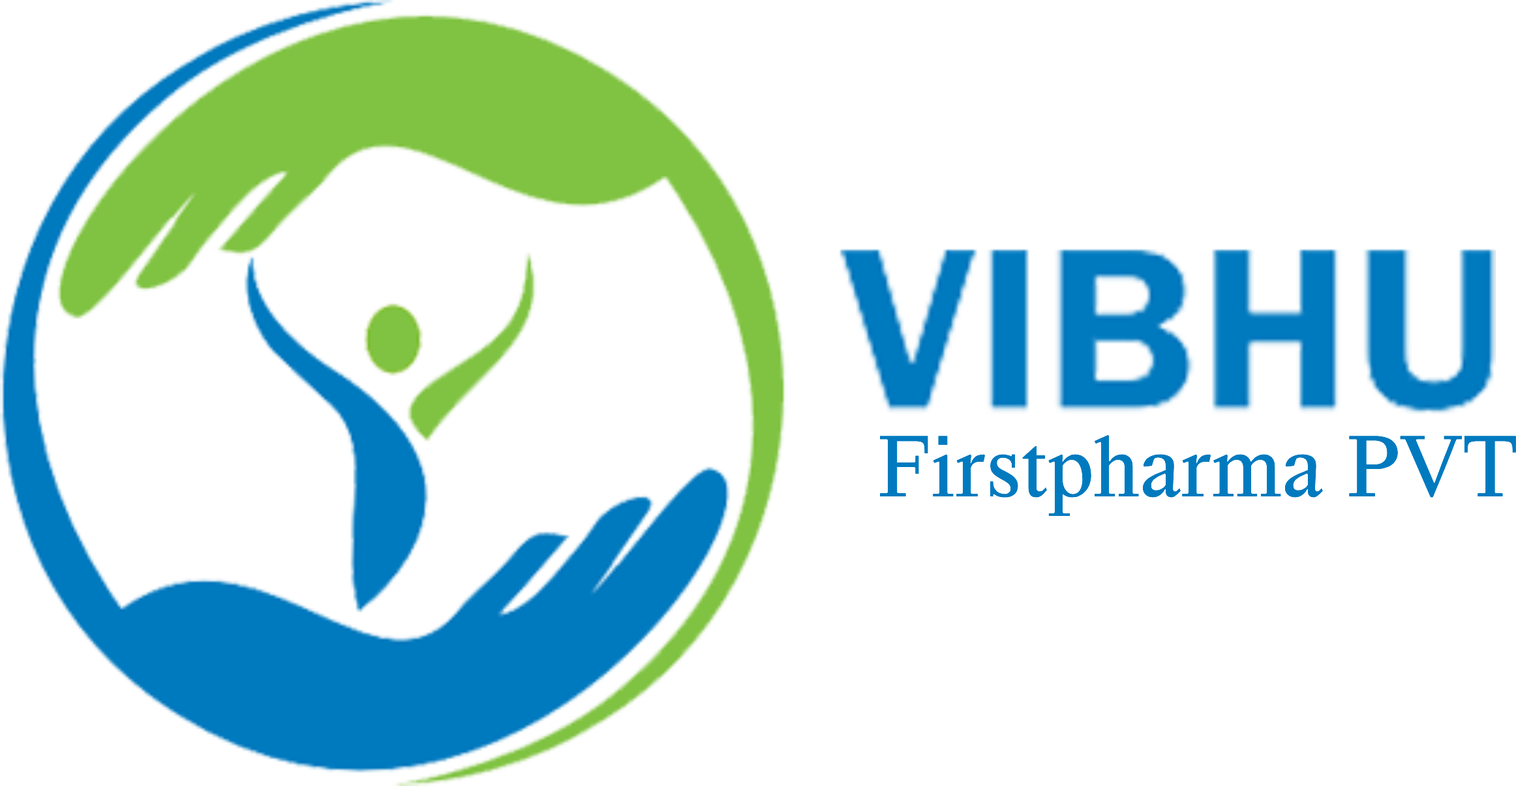
<style>
.page{position:relative;width:1516px;height:786px;background:#ffffff}
.page>*{position:absolute;margin:0}
.t1{font:91.4px "HappyTimesattheIKOB-Regular";color:#007abf}
</style>
<div class="page">
<p class="t1" style="left:880px;top:435px;width:636px;height:82px">Firstpharma PVT</p>
</div>
